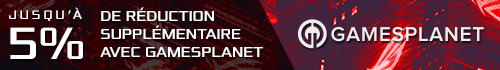
<style>
.page{position:relative;width:500px;height:70px}
.page>*{position:absolute;margin:0}
.t1{font:12.7px/39.3px "Xolonium";letter-spacing:0.24em;color:#ffffff;text-transform:uppercase;scale:0.91 1}
.t2{font:47.4px/39.3px "Xolonium";color:#ffffff;text-transform:uppercase;scale:0.91 1}
.t3{font:15px/18px "Xolonium";color:#ffffff;text-transform:uppercase;scale:0.91 1}
</style>
<div class="page">
<p class="t1" style="left:9px;top:7px;width:74px;height:52px">Jusqu’à <br><span class="t2">5%</span></p>
<p class="t3" style="left:100px;top:7px;width:163px;height:50px">de réduction supplémentaire <br>avec Gamesplanet</p>
</div>
